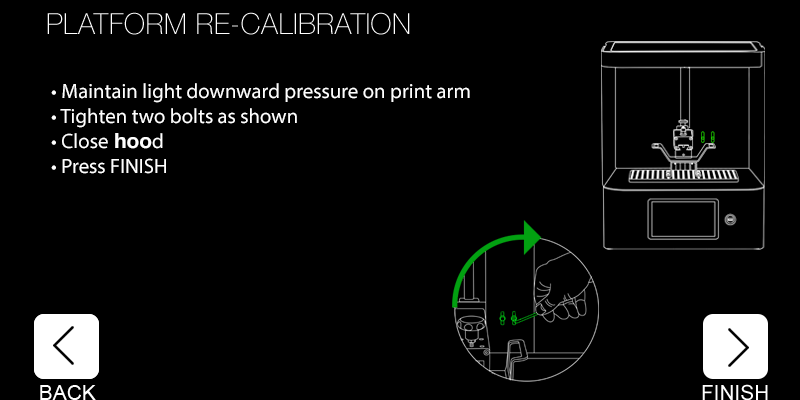
<style>
.page{position:relative;width:800px;height:400px;background:#000000}
.page>*{position:absolute;margin:0}
.t1{font:20.8px "MyriadPro-Regular";color:#ffffff}
.t2{font:20.8px "HelveticaNeueBold";color:#ffffff}
</style>
<div class="page">
<p class="t1" style="left:51px;top:83px;width:419px;height:91px">• Maintain light downward pressure on print arm<br>• Tighten two bolts as shown<br>• Close<span class="t2"> hoo</span>d<br>• Press FINISH</p>
</div>
